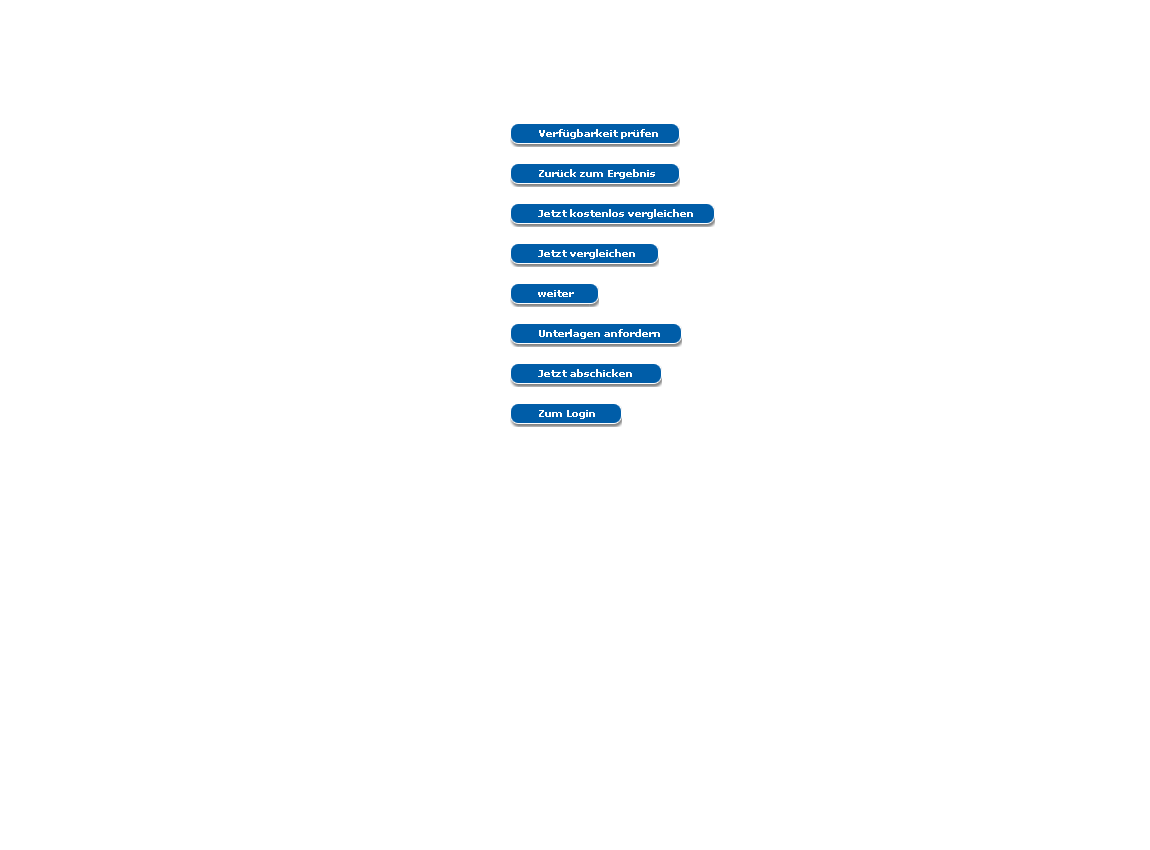
<style>
.page{position:relative;width:1150px;height:850px;background:#ffffff}
.page>*{position:absolute;margin:0}
.t1{font:10px "Verdana-Bold";color:#ffffff}
</style>
<div class="page">
<p class="t1" style="left:539px;top:129px;width:119px;height:10px">Verfügbarkeit prüfen</p>
<p class="t1" style="left:539px;top:169px;width:116px;height:10px">Zurück zum Ergebnis</p>
<p class="t1" style="left:538px;top:209px;width:155px;height:10px">Jetzt kostenlos vergleichen</p>
<p class="t1" style="left:538px;top:249px;width:97px;height:10px">Jetzt vergleichen</p>
<p class="t1" style="left:538px;top:290px;width:36px;height:7px">weiter</p>
<p class="t1" style="left:539px;top:329px;width:121px;height:10px">Unterlagen anfordern</p>
<p class="t1" style="left:538px;top:369px;width:94px;height:8px">Jetzt abschicken</p>
<p class="t1" style="left:539px;top:410px;width:56px;height:9px">Zum Login</p>
</div>
